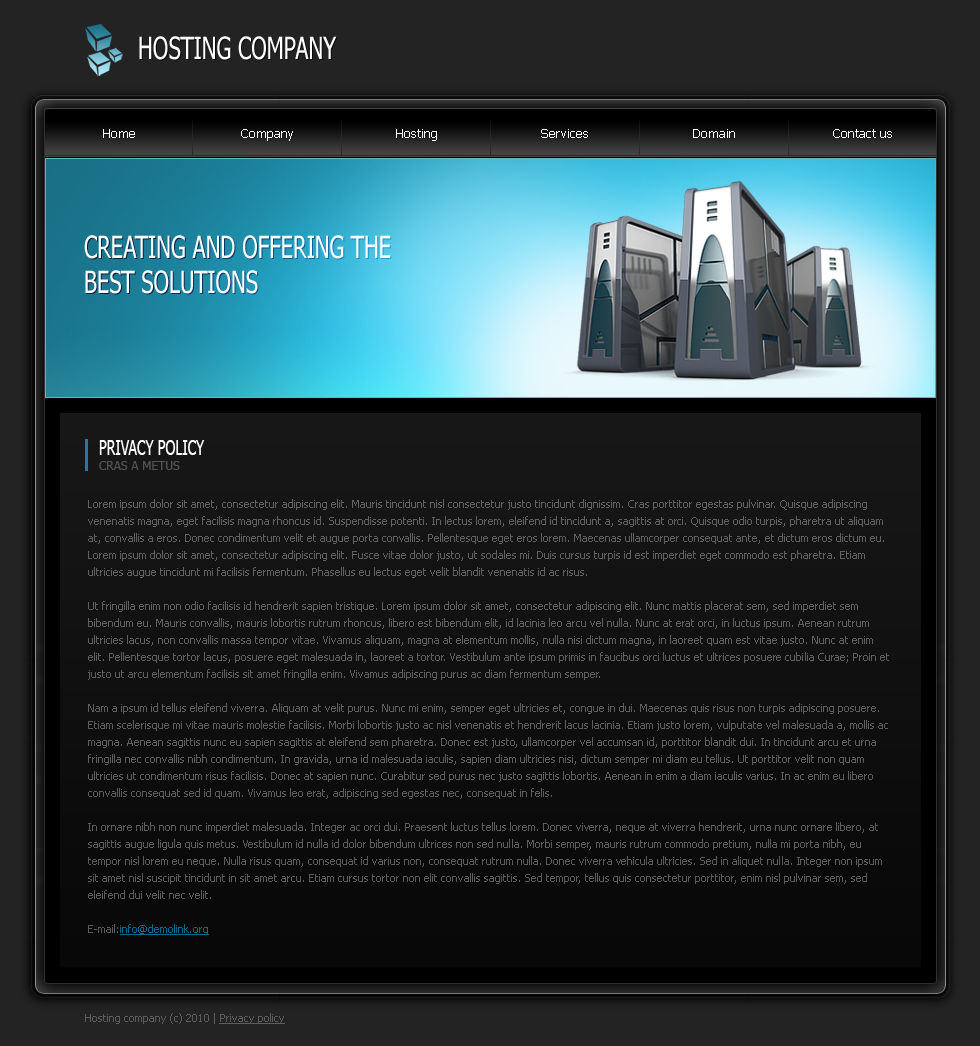
<style>
.page{position:relative;width:980px;height:1046px}
.page>*{position:absolute;margin:0}
.t1{font:30.8px "Tahoma";color:#ffffff;text-transform:uppercase;scale:0.71 1}
.t2{font:13px "Tahoma";color:#ffffff}
.t3{font:21px "Tahoma";color:#ffffff;text-transform:uppercase;scale:0.67 1}
.t4{font:30.8px/35px "Tahoma";color:#ffffff;text-transform:uppercase;scale:0.71 1}
.t5{font:19.6px "Tahoma";color:#ffffff;text-transform:uppercase;scale:0.71 1}
.t6{font:12px "Tahoma";color:#525252;text-transform:uppercase}
.t7{font:11px/17px "Tahoma";color:#5f5f5f}
.t8{font:11px/17px "Tahoma";color:#5f5f5f;text-decoration:underline}
.t9{font:11px "Tahoma";color:#5d5d5d}
.t10{font:11px "Tahoma";color:#5d5d5d;text-decoration:underline}
</style>
<div class="page">
<p class="t1" style="left:139px;top:36px;width:198px;height:24px">Hosting company</p>
<p class="t2" style="left:103px;top:129px;width:32px;height:9px"><span class="t3"><br></span>Home</p>
<p class="t2" style="left:241px;top:129px;width:52px;height:12px">Company</p>
<p class="t2" style="left:396px;top:129px;width:41px;height:12px">Hosting</p>
<p class="t2" style="left:541px;top:129px;width:47px;height:9px">Services</p>
<p class="t2" style="left:693px;top:129px;width:42px;height:9px">Domain</p>
<p class="t2" style="left:833px;top:129px;width:59px;height:9px">Contact us</p>
<p class="t4" style="left:84px;top:235px;width:307px;height:59px">Creating and offering the<br>best solutions</p>
<p class="t5" style="left:99px;top:440px;width:106px;height:15px">privacy policy</p>
<p class="t6" style="left:99px;top:461px;width:81px;height:9px">Cras a metus</p>
<p class="t7" style="left:88px;top:499px;width:801px;height:436px">Lorem ipsum dolor sit amet, consectetur adipiscing elit. Mauris tincidunt nisl consectetur justo tincidunt dignissim. Cras porttitor egestas pulvinar. Quisque adipiscing venenatis magna, eget facilisis magna rhoncus id. Suspendisse potenti. In lectus lorem, eleifend id tincidunt a, sagittis at orci. Quisque odio turpis, pharetra ut aliquam at, convallis a eros. Donec condimentum velit et augue porta convallis. Pellentesque eget eros lorem. Maecenas ullamcorper consequat ante, et dictum eros dictum eu. Lorem ipsum dolor sit amet, consectetur adipiscing elit. Fusce vitae dolor justo, ut sodales mi. Duis cursus turpis id est imperdiet eget commodo est pharetra. Etiam ultricies augue tincidunt mi facilisis fermentum. Phasellus eu lectus eget velit blandit venenatis id ac risus.<br><br>Ut fringilla enim non odio facilisis id hendrerit sapien tristique. Lorem ipsum dolor sit amet, consectetur adipiscing elit. Nunc mattis placerat sem, sed imperdiet sem bibendum eu. Mauris convallis, mauris lobortis rutrum rhoncus, libero est bibendum elit, id lacinia leo arcu vel nulla. Nunc at erat orci, in luctus ipsum. Aenean rutrum ultricies lacus, non convallis massa tempor vitae. Vivamus aliquam, magna at elementum mollis, nulla nisi dictum magna, in laoreet quam est vitae justo. Nunc at enim elit. Pellentesque tortor lacus, posuere eget malesuada in, laoreet a tortor. Vestibulum ante ipsum primis in faucibus orci luctus et ultrices posuere cubilia Curae; Proin et justo ut arcu elementum facilisis sit amet fringilla enim. Vivamus adipiscing purus ac diam fermentum semper.<br><br>Nam a ipsum id tellus eleifend viverra. Aliquam at velit purus. Nunc mi enim, semper eget ultricies et, congue in dui. Maecenas quis risus non turpis adipiscing posuere. Etiam scelerisque mi vitae mauris molestie facilisis. Morbi lobortis justo ac nisl venenatis et hendrerit lacus lacinia. Etiam justo lorem, vulputate vel malesuada a, mollis ac magna. Aenean sagittis nunc eu sapien sagittis at eleifend sem pharetra. Donec est justo, ullamcorper vel accumsan id, porttitor blandit dui. In tincidunt arcu et urna fringilla nec convallis nibh condimentum. In gravida, urna id malesuada iaculis, sapien diam ultricies nisi, dictum semper mi diam eu tellus. Ut porttitor velit non quam ultricies ut condimentum risus facilisis. Donec at sapien nunc. Curabitur sed purus nec justo sagittis lobortis. Aenean in enim a diam iaculis varius. In ac enim eu libero convallis consequat sed id quam. Vivamus leo erat, adipiscing sed egestas nec, consequat in felis.<br><br>In ornare nibh non nunc imperdiet malesuada. Integer ac orci dui. Praesent luctus tellus lorem. Donec viverra, neque at viverra hendrerit, urna nunc ornare libero, at sagittis augue ligula quis metus. Vestibulum id nulla id dolor bibendum ultrices non sed nulla. Morbi semper, mauris rutrum commodo pretium, nulla mi porta nibh, eu tempor nisl lorem eu neque. Nulla risus quam, consequat id varius non, consequat rutrum nulla. Donec viverra vehicula ultricies. Sed in aliquet nulla. Integer non ipsum sit amet nisl suscipit tincidunt in sit amet arcu. Etiam cursus tortor non elit convallis sagittis. Sed tempor, tellus quis consectetur porttitor, enim nisl pulvinar sem, sed eleifend dui velit nec velit. <br><br>E-mail:<span class="t8">info@demolink.org<br></span>Mauris congue consectetur malesuada. Duis urna sapien, mattis nec scelerisque non, lobortis eget nunc. Sed ultricies nisi ac nulla vehicula non varius neque imperdiet. Cum sociis natoque penatibus et magnis dis parturient montes, nascetur ridiculus mus. In quam lorem, suscipit sit amet tempus eu, placerat a sem. Curabitur ullamcorper sollicitudin blandit. Nunc tincidunt tincidunt nunc, nec varius erat mattis at. Aenean congue aliquet libero sit amet tristique. Curabitur ante ante, rhoncus in accumsan nec, mattis et lorem. Duis at turpis a erat feugiat venenatis non quis mi. Nulla et tellus odio. Donec enim nibh, consequat quis adipiscing ut, iaculis nec mauris. Maecenas et urna tortor, at fringilla arcu. Praesent sed magna dolor. Fusce sit amet sem ut nunc iaculis imperdiet.</p>
<p class="t9" style="left:85px;top:1013px;width:200px;height:11px">Hosting company (c) 2010 | <span class="t10">Privacy policy</span></p>
</div>
